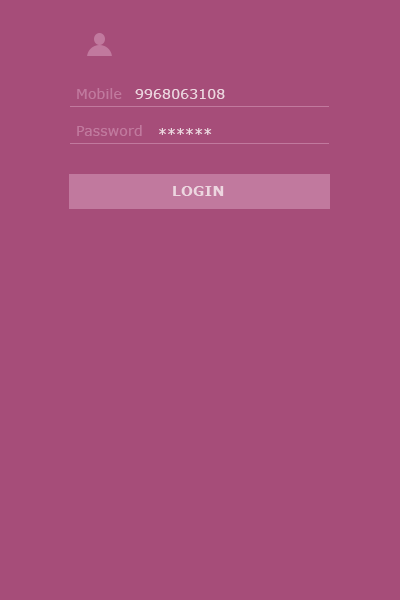
<style>
.page{position:relative;width:400px;height:600px;background:#a64d79}
.page>*{position:absolute;margin:0}
.t1{font:14px "Verdana";letter-spacing:0.01em;color:#c1799e}
.t2{font:14px "Verdana";letter-spacing:0.01em;color:#edd6e0}
.t3{font:14px "Verdana-Bold";letter-spacing:0.01em;color:#edd6e0}
</style>
<div class="page">
<p class="t1" style="left:77px;top:88px;width:45px;height:11px">Mobile</p>
<p class="t2" style="left:135px;top:89px;width:90px;height:10px">9968063108</p>
<p class="t1" style="left:77px;top:125px;width:65px;height:11px">Password</p>
<p class="t2" style="left:159px;top:128px;width:53px;height:7px">******</p>
<p class="t3" style="left:173px;top:186px;width:51px;height:10px">LOGIN</p>
</div>
